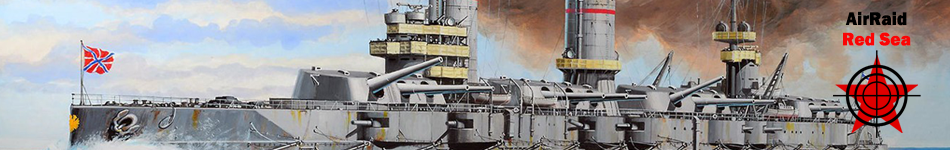
<style>
.page{position:relative;width:950px;height:150px}
.page>*{position:absolute;margin:0}
.t1{font:19px/40.8px "FranklinGothic-Heavy";color:#000000;scale:0.93 1}
.t2{font:19px/20.5px "FranklinGothic-Heavy";color:#fa0505;scale:0.93 1}
</style>
<div class="page">
<p class="t1" style="left:843px;top:11px;width:68px;height:35px;text-align:center">AirRaid<br><span class="t2">Red Sea</span></p>
</div>
